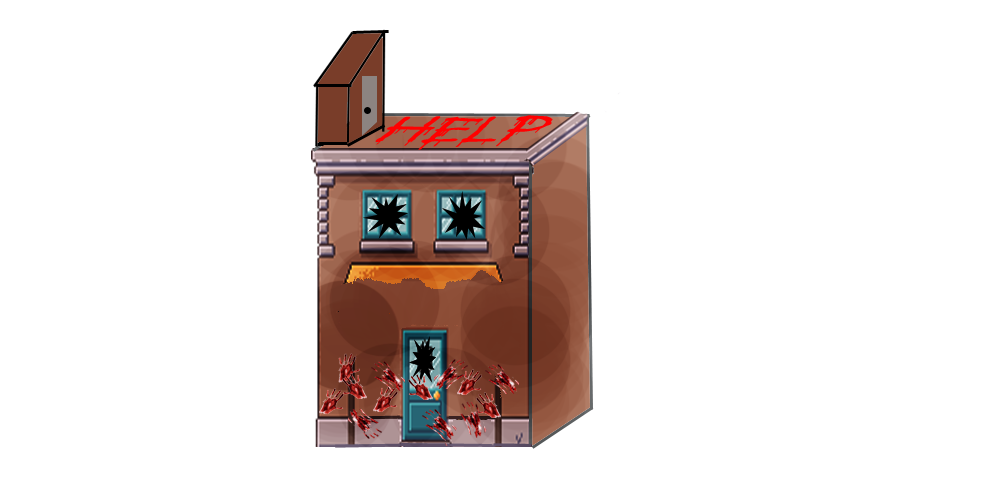
<style>
.page{position:relative;width:1000px;height:500px;background:#ffffff}
.page>*{position:absolute;margin:0}
.t1{font:64.9px "Anti-Everything";color:#ff0000;scale:1.46 1}
</style>
<div class="page">
<p class="t1" style="left:375px;top:115px;width:178px;height:35px">help</p>
</div>
